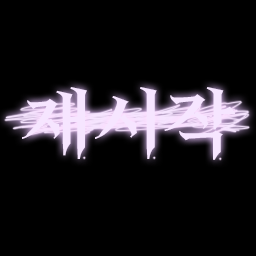
<style>
.page{position:relative;width:256px;height:256px;background:#000000}
.page>*{position:absolute;margin:0}
.t1{font:72px "HeirofLightBold";color:#f6e5ff}
</style>
<div class="page">
<p class="t1" style="left:22px;top:87px;width:214px;height:73px">재시작</p>
</div>
